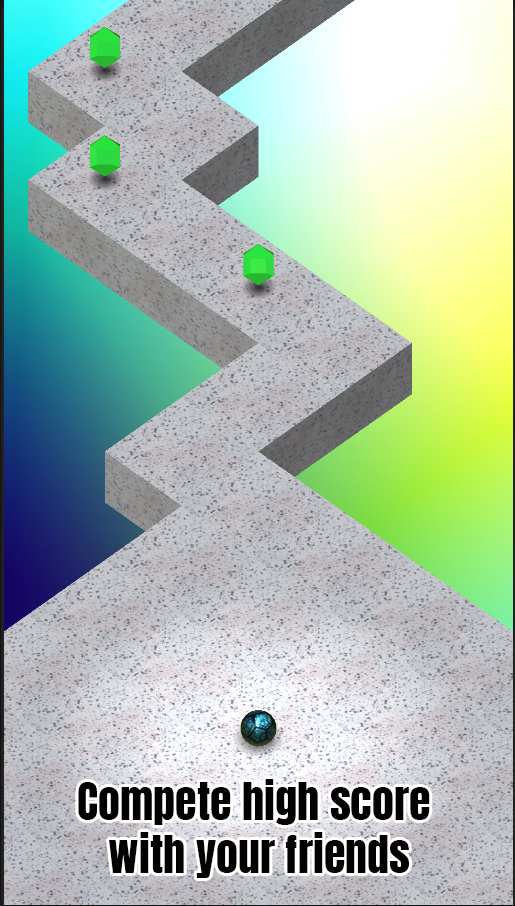
<style>
.page{position:relative;width:515px;height:906px}
.page>*{position:absolute;margin:0}
.t1{font:44px "Anton-Regular";color:#030200}
</style>
<div class="page">
<p class="t1" style="left:78px;top:779px;width:352px;height:99px;text-align:center">Compete high score <br>with your friends</p>
</div>
